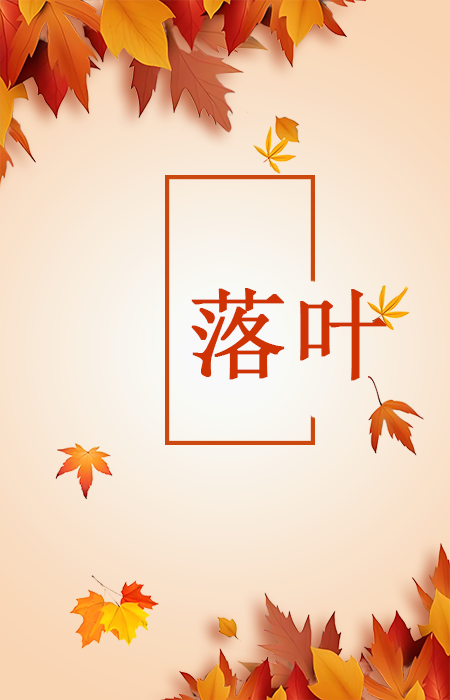
<style>
.page{position:relative;width:450px;height:700px}
.page>*{position:absolute;margin:0}
.t1{font:99px "SimSun";letter-spacing:0.01em;color:#cf3203;font-weight:bold}
</style>
<div class="page">
<p class="t1" style="left:191px;top:288px;width:196px;height:93px">落叶</p>
</div>
